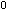
<style>
.page{position:relative;width:7px;height:9px;background:#ffffff}
.page>*{position:absolute;margin:0}
.t1{font:11px "LucidaGrande";color:#000000}
</style>
<div class="page">
<p class="t1" style="left:1px;top:1px;width:5px;height:8px">0</p>
</div>
